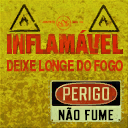
<style>
.page{position:relative;width:128px;height:128px}
.page>*{position:absolute;margin:0}
.t1{font:25.3px "Impact";color:#ce2c08}
.t2{font:14.7px "Helvetica-Narrow-Bold";letter-spacing:-0.03em;color:#ce3008;font-weight:bold;scale:0.83 1}
.t3{font:18.5px "RefrigeratorDeluxe";color:#dee394;text-transform:uppercase;font-weight:bold;scale:1.07 1}
.t4{font:14.5px "RefrigeratorDeluxe-Bold";letter-spacing:0.02em;color:#000000;text-transform:uppercase;font-weight:bold;scale:1.05 1}
</style>
<div class="page">
<p class="t1" style="left:80px;top:30px;width:7px;height:3px">´</p>
<p class="t1" style="left:13px;top:34px;width:12px;height:20px">N</p>
<p class="t1" style="left:86px;top:34px;width:15px;height:20px">V</p>
<p class="t2" style="left:7px;top:60px;width:116px;height:12px">DEIXE LONGE DO FOGO</p>
<p class="t3" style="left:63px;top:87px;width:46px;height:14px">perigo</p>
<p class="t4" style="left:58px;top:107px;width:56px;height:14px">não fume</p>
</div>
